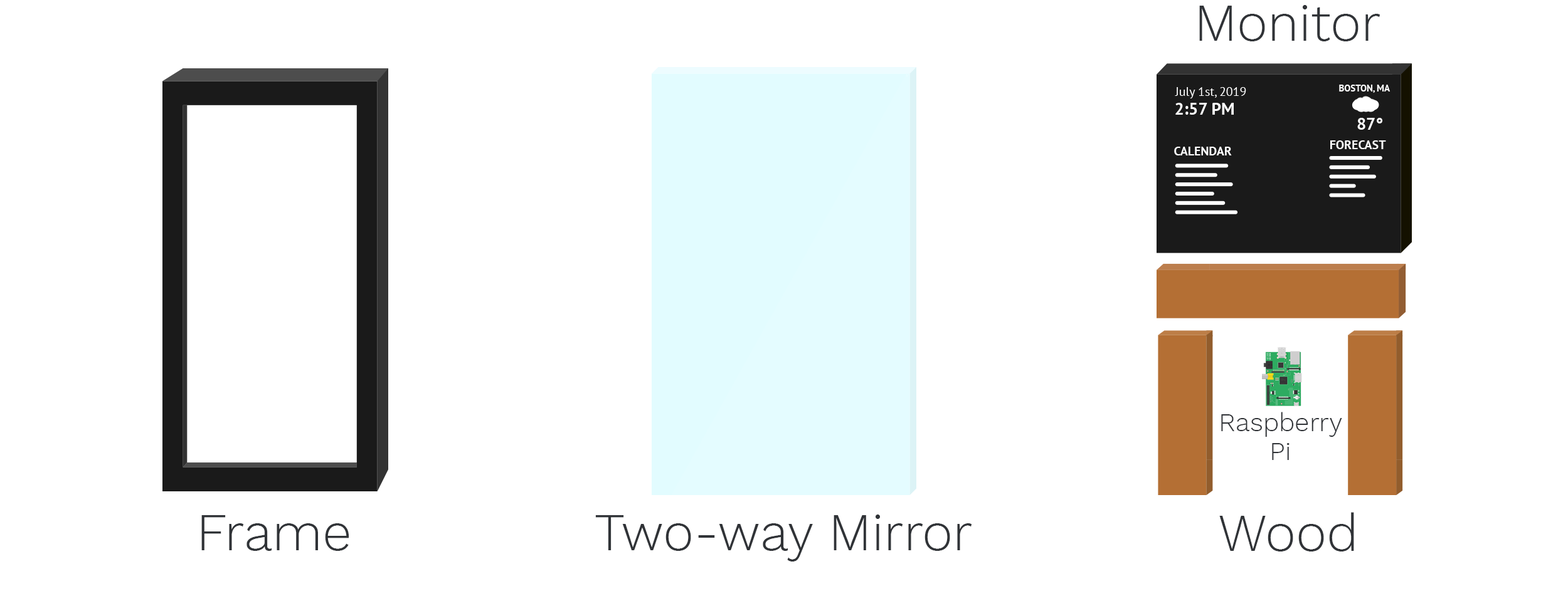
<style>
.page{position:relative;width:1568px;height:601px;background:#ffffff}
.page>*{position:absolute;margin:0}
.t1{font:52.3px "WorkSans-Light";color:#303337}
.t2{font:26.1px/28.7px "WorkSans-Light";color:#303337}
</style>
<div class="page">
<p class="t1" style="left:1199px;top:5px;width:181px;height:36px">Monitor</p>
<p class="t2" style="left:1221px;top:412px;width:121px;height:48px;text-align:center">Raspberry<br>Pi</p>
<p class="t1" style="left:201px;top:516px;width:148px;height:35px">Frame</p>
<p class="t1" style="left:595px;top:515px;width:377px;height:47px">Two-way Mirror</p>
<p class="t1" style="left:1219px;top:512px;width:135px;height:40px">Wood</p>
</div>
